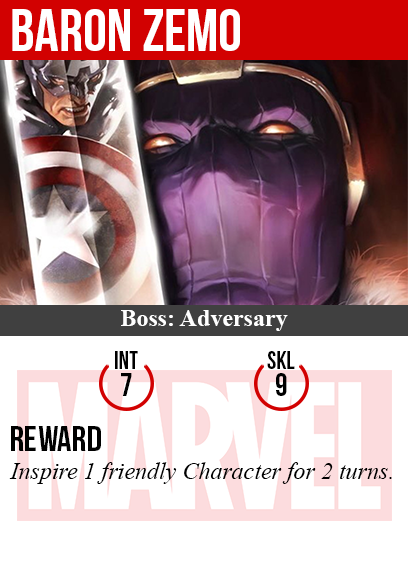
<style>
.page{position:relative;width:408px;height:585px;background:#ffffff}
.page>*{position:absolute;margin:0}
.t1{font:60px "BebasNeue";color:#ffffff}
.t2{font:24px "TimesNewRomanPS-BoldMT";color:#ffffff}
.t3{font:25px "BebasNeue";color:#000000}
.t4{font:32px "BebasNeue";color:#000000}
.t5{font:36px "BebasNeue";color:#000000}
.t6{font:24px "TimesNewRomanPS-ItalicMT";color:#000000}
</style>
<div class="page">
<p class="t1" style="left:12px;top:9px;width:228px;height:42px">baron zemo</p>
<p class="t2" style="left:121px;top:310px;width:167px;height:21px">Boss: Adversary</p>
<p class="t3" style="left:115px;top:351px;width:23px;height:18px">int</p>
<p class="t3" style="left:267px;top:351px;width:28px;height:18px">skl</p>
<p class="t4" style="left:121px;top:373px;width:11px;height:23px">7</p>
<p class="t4" style="left:276px;top:373px;width:11px;height:23px">9</p>
<p class="t5" style="left:11px;top:426px;width:90px;height:25px">reward</p>
<p class="t6" style="left:9px;top:462px;width:383px;height:22px">Inspire 1 friendly Character for 2 turns.</p>
</div>
